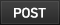
<style>
.page{position:relative;width:60px;height:25px}
.page>*{position:absolute;margin:0}
.t1{font:13px "HCRDotum-Bold";color:#ffffff}
</style>
<div class="page">
<p class="t1" style="left:14px;top:7px;width:32px;height:11px">POST</p>
</div>
